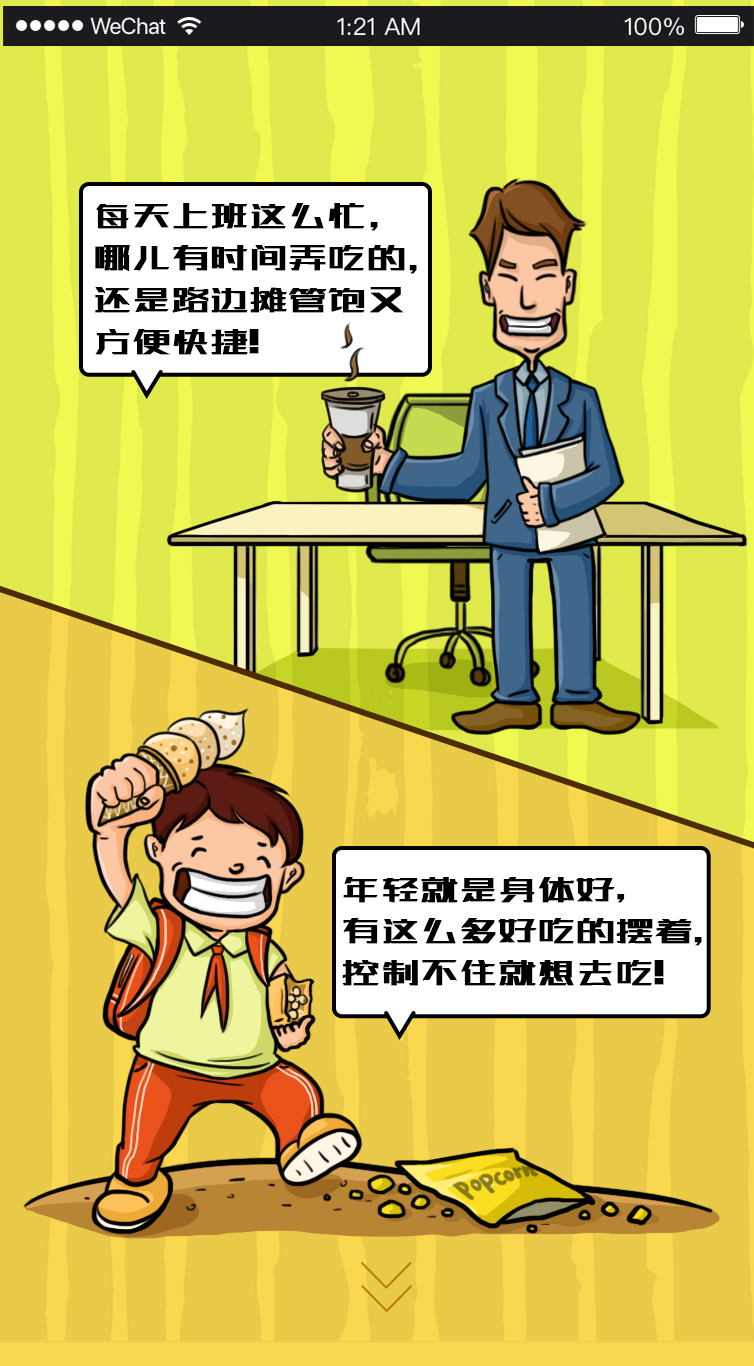
<style>
.page{position:relative;width:754px;height:1366px;background:#e0ea4c}
.page>*{position:absolute;margin:0}
.t1{font:39.9px/41.9px "zcool-gdh";letter-spacing:-0.05em;color:#000000;font-weight:bold}
.t2{font:29.9px "zcool-gdh";letter-spacing:-0.05em;color:#000000;font-weight:bold}
.t3{font:30px "zcool-gdh";letter-spacing:-0.05em;color:#000000;font-weight:bold}
</style>
<div class="page">
<p class="t1" style="left:95px;top:203px;width:310px;height:152px">每天上班这么忙<br>哪儿有时间弄吃的<br>还是路边摊管饱又<br>方便快捷!</p>
<p class="t2" style="left:370px;top:222px;width:8px;height:9px">,</p>
<p class="t2" style="left:409px;top:265px;width:8px;height:9px">,</p>
<p class="t1" style="left:342px;top:877px;width:350px;height:109px">年轻就是身体好<br>有这么多好吃的摆着<br>控制不住就想去吃!</p>
<p class="t3" style="left:617px;top:894px;width:8px;height:9px">,</p>
<p class="t3" style="left:694px;top:937px;width:8px;height:9px">,</p>
</div>
